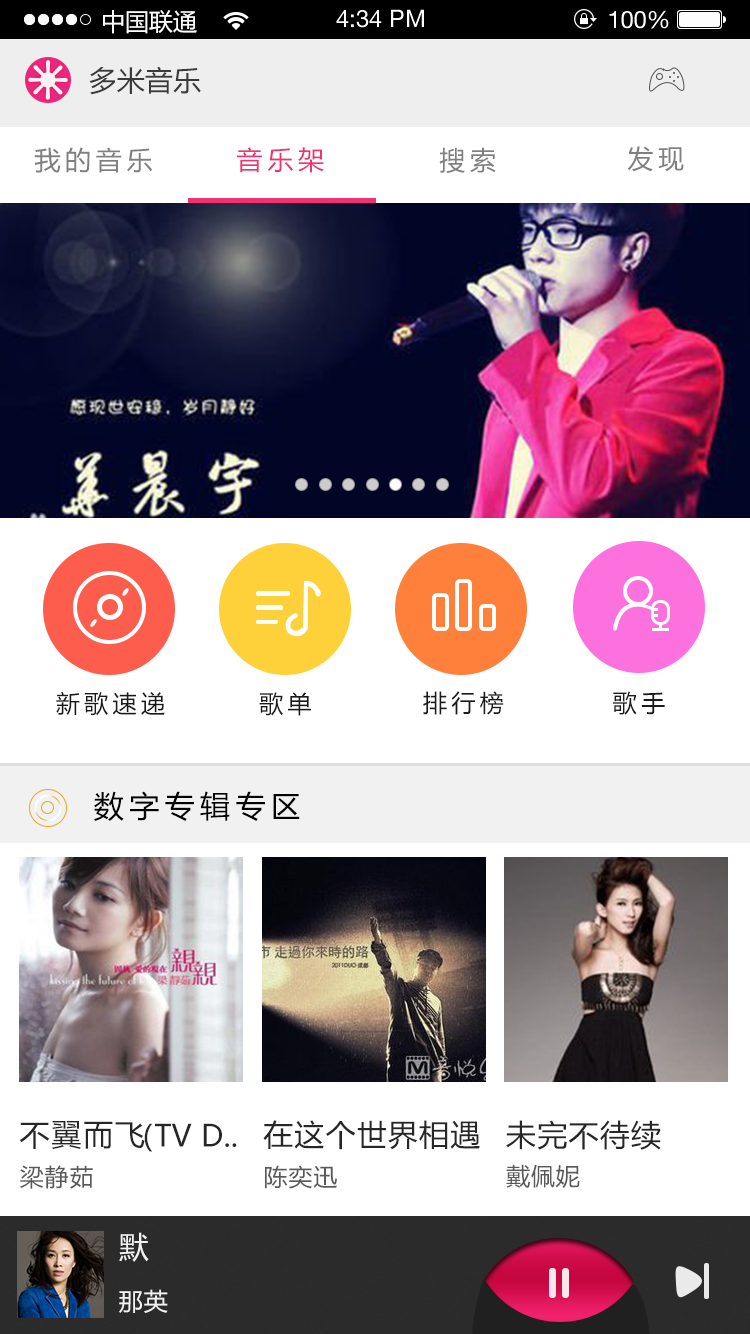
<style>
.page{position:relative;width:750px;height:1334px;background:#ffffff}
.page>*{position:absolute;margin:0}
.t1{font:24px "MicrosoftYaHei";color:#fdfdfd}
.t2{font:28px "MicrosoftYaHei";letter-spacing:0.005em;color:#3a3a3a}
.t3{font:26px "MicrosoftYaHei";letter-spacing:0.18em;color:#7f7f7f}
.t4{font:26px "MicrosoftYaHei";letter-spacing:0.18em;color:#f13172}
.t5{font:24px "MicrosoftYaHei";letter-spacing:0.18em;color:#1a1a1a}
.t6{font:30px "MicrosoftYaHei";letter-spacing:0.18em;color:#000000}
.t7{font:30px "MicrosoftYaHei";letter-spacing:0.06em;color:#272626}
.t8{font:30px "MicrosoftYaHei";letter-spacing:0.04em;color:#272626}
.t9{font:30px "MicrosoftYaHei";color:#272626}
.t10{font:24px "MicrosoftYaHei";letter-spacing:0.04em;color:#595959}
.t11{font:24px "MicrosoftYaHei";letter-spacing:0.04em;color:#5a5a5a}
.t12{font:30px "MicrosoftYaHei";letter-spacing:0.06em;color:#f3f2f2}
.t13{font:24px "MicrosoftYaHei";letter-spacing:0.06em;color:#f3f2f2}
</style>
<div class="page">
<p class="t1" style="left:103px;top:10px;width:94px;height:24px">中国联通</p>
<p class="t2" style="left:89px;top:66px;width:112px;height:29px">多米音乐</p>
<p class="t3" style="left:34px;top:147px;width:119px;height:26px">我的音乐</p>
<p class="t4" style="left:237px;top:147px;width:87px;height:26px">音乐架</p>
<p class="t3" style="left:439px;top:147px;width:57px;height:26px">搜索</p>
<p class="t3" style="left:627px;top:146px;width:57px;height:26px">发现</p>
<p class="t5" style="left:56px;top:691px;width:109px;height:25px">新歌速递</p>
<p class="t5" style="left:259px;top:692px;width:52px;height:24px">歌单</p>
<p class="t5" style="left:423px;top:691px;width:81px;height:24px">排行榜</p>
<p class="t5" style="left:613px;top:691px;width:52px;height:24px">歌手</p>
<p class="t6" style="left:94px;top:791px;width:206px;height:30px">数字专辑专区</p>
<p class="t7" style="left:19px;top:1121px;width:126px;height:28px">不翼而飞</p>
<p class="t8" style="left:263px;top:1120px;width:217px;height:30px">在这个世界相遇</p>
<p class="t8" style="left:506px;top:1120px;width:155px;height:30px">未完不待续</p>
<p class="t9" style="left:144px;top:1123px;width:93px;height:29px"><span class="t7">(</span>TV D..</p>
<p class="t10" style="left:20px;top:1165px;width:73px;height:24px">梁静茹</p>
<p class="t11" style="left:265px;top:1165px;width:72px;height:24px">陈奕迅</p>
<p class="t11" style="left:506px;top:1164px;width:74px;height:24px">戴佩妮</p>
<p class="t12" style="left:119px;top:1232px;width:30px;height:30px">默</p>
<p class="t13" style="left:119px;top:1289px;width:49px;height:24px">那英</p>
</div>
